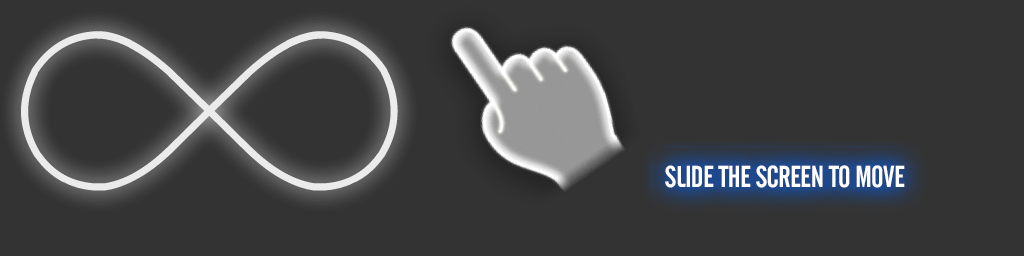
<style>
.page{position:relative;width:1024px;height:256px;background:#333333}
.page>*{position:absolute;margin:0}
.t1{font:30px "UTM-Cafeta";letter-spacing:-0.025em;color:#ffffff;text-transform:uppercase}
</style>
<div class="page">
<p class="t1" style="left:665px;top:165px;width:240px;height:23px">Slide the screen to move</p>
</div>
